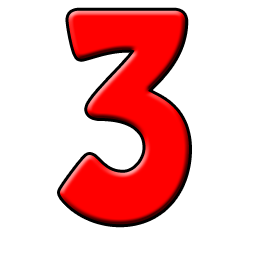
<style>
.page{position:relative;width:256px;height:256px;background:#ffffff}
.page>*{position:absolute;margin:0}
.t1{font:250px "HoboStd";color:#ff0000;font-weight:bold}
</style>
<div class="page">
<p class="t1" style="left:60px;top:10px;width:129px;height:215px">3</p>
</div>
